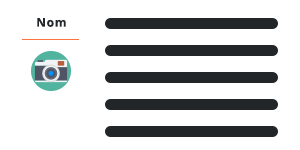
<style>
.page{position:relative;width:300px;height:150px;background:#ffffff}
.page>*{position:absolute;margin:0}
.t1{font:12px "OpenSans-Bold";letter-spacing:0.06em;color:#232629}
</style>
<div class="page">
<p class="t1" style="left:37px;top:18px;width:29px;height:9px">Nom</p>
</div>
